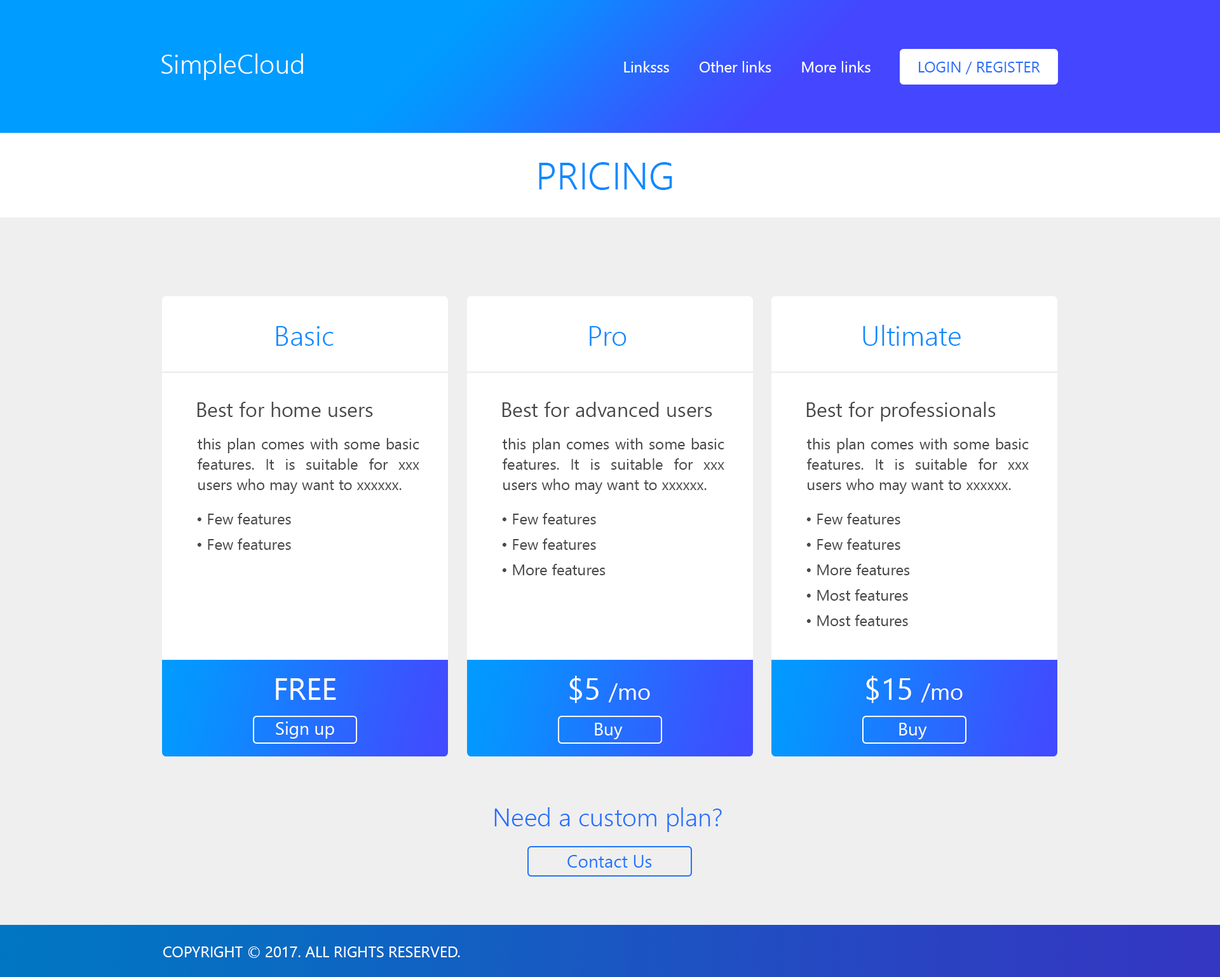
<style>
.page{position:relative;width:1220px;height:977px;background:#efefef}
.page>*{position:absolute;margin:0}
.t1{font:26.7px "NirmalaUI-Semilight";color:#ffffff}
.t2{font:15.3px "NirmalaUI";color:#ffffff}
.t3{font:15.3px "NirmalaUI";color:#276cff}
.t4{font:38.1px "NirmalaUI-Semilight";color:#0f8aff}
.t5{font:28px "NirmalaUI-Semilight";color:#0f8aff}
.t6{font:20.3px "NirmalaUI";color:#494949}
.t7{font:15.3px/20.3px "NirmalaUI";color:#494949}
.t8{font:7.6px/25.4px "NirmalaUI";color:#494949}
.t9{font:22.9px "NirmalaUI";color:#ffffff}
.t10{font:30.5px "NirmalaUI";color:#ffffff}
.t11{font:17.8px "NirmalaUI";color:#ffffff}
.t12{font:25.4px "NirmalaUI-Semilight";color:#2370ff}
.t13{font:17.8px "NirmalaUI";color:#1f74ff}
</style>
<div class="page">
<p class="t1" style="left:161px;top:53px;width:142px;height:27px">SimpleCloud</p>
<p class="t2" style="left:624px;top:61px;width:247px;height:11px">Linksss       Other links       More links</p>
<p class="t3" style="left:919px;top:62px;width:122px;height:12px">LOGIN / REGISTER</p>
<p class="t4" style="left:539px;top:162px;width:134px;height:28px">PRICING</p>
<p class="t5" style="left:277px;top:326px;width:57px;height:20px">Basic</p>
<p class="t5" style="left:590px;top:326px;width:37px;height:20px">Pro</p>
<p class="t5" style="left:863px;top:325px;width:98px;height:21px">Ultimate</p>
<p class="t6" style="left:197px;top:402px;width:176px;height:15px">Best for home users</p>
<p class="t6" style="left:502px;top:402px;width:211px;height:15px">Best for advanced users</p>
<p class="t6" style="left:807px;top:402px;width:189px;height:19px">Best for professionals</p>
<p class="t7" style="left:197px;top:438px;width:223px;height:56px;text-align:justify">this plan comes with some basic features. It is suitable for xxx users who may want to xxxxxx.</p>
<p class="t7" style="left:502px;top:438px;width:223px;height:56px;text-align:justify">this plan comes with some basic features. It is suitable for xxx users who may want to xxxxxx.</p>
<p class="t7" style="left:807px;top:438px;width:222px;height:56px;text-align:justify">this plan comes with some basic features. It is suitable for xxx users who may want to xxxxxx.</p>
<p class="t8" style="left:197px;top:513px;width:94px;height:37px;text-align:justify">• Few features<br>• Few features</p>
<p class="t8" style="left:502px;top:513px;width:104px;height:62px;text-align:justify">• Few features<br>• Few features<br>• More features</p>
<p class="t8" style="left:807px;top:513px;width:103px;height:113px;text-align:justify">• Few features<br>• Few features<br>• More features<br>• Most features<br>• Most features</p>
<p class="t9" style="left:570px;top:676px;width:80px;height:27px"><span class="t10">$5 </span>/mo</p>
<p class="t10" style="left:866px;top:676px;width:97px;height:27px">$15 <span class="t9">/mo</span></p>
<p class="t10" style="left:276px;top:678px;width:60px;height:22px">FREE</p>
<p class="t11" style="left:276px;top:721px;width:58px;height:18px">Sign up</p>
<p class="t11" style="left:595px;top:723px;width:28px;height:16px">Buy</p>
<p class="t11" style="left:899px;top:723px;width:28px;height:16px">Buy</p>
<p class="t12" style="left:495px;top:807px;width:227px;height:25px">Need a custom plan?</p>
<p class="t13" style="left:568px;top:855px;width:84px;height:13px">Contact Us</p>
<p class="t2" style="left:163px;top:947px;width:297px;height:11px">COPYRIGHT © 2017. ALL RIGHTS RESERVED.</p>
</div>
